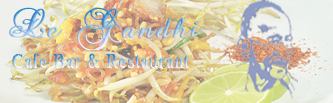
<style>
.page{position:relative;width:333px;height:103px}
.page>*{position:absolute;margin:0}
.t1{font:27.8px "Precious";letter-spacing:0.055em;font-weight:bold;scale:1.19 1}
.t2{font:20.3px "MS Serif";letter-spacing:0.055em;font-weight:bold;scale:0.85 1}
</style>
<div class="page">
<p class="t1" style="left:9px;top:7px;width:193px;height:44px">Le Gandhi</p>
<p class="t2" style="left:12px;top:53px;width:177px;height:16px">Cafe Bar &amp; Restaurant</p>
</div>
